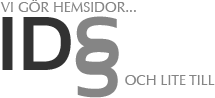
<style>
.page{position:relative;width:215px;height:98px;background:#ffffff}
.page>*{position:absolute;margin:0}
.t1{font:14px "Optima-Regular";color:#858585;text-transform:uppercase}
.t2{font:76px "Sansation-Bold";color:#323232;text-transform:uppercase}
.t3{font:76px "Sansation-Bold";color:#858585;text-transform:uppercase}
</style>
<div class="page">
<p class="t1" style="left:0px;top:0px;width:136px;height:12px">vi gör hemsidor...</p>
<p class="t2" style="left:2px;top:17px;width:69px;height:53px">id</p>
<p class="t3" style="left:76px;top:16px;width:43px;height:55px">s</p>
<p class="t3" style="left:75px;top:43px;width:43px;height:55px">s</p>
<p class="t1" style="left:125px;top:75px;width:90px;height:10px">och lite till</p>
</div>
